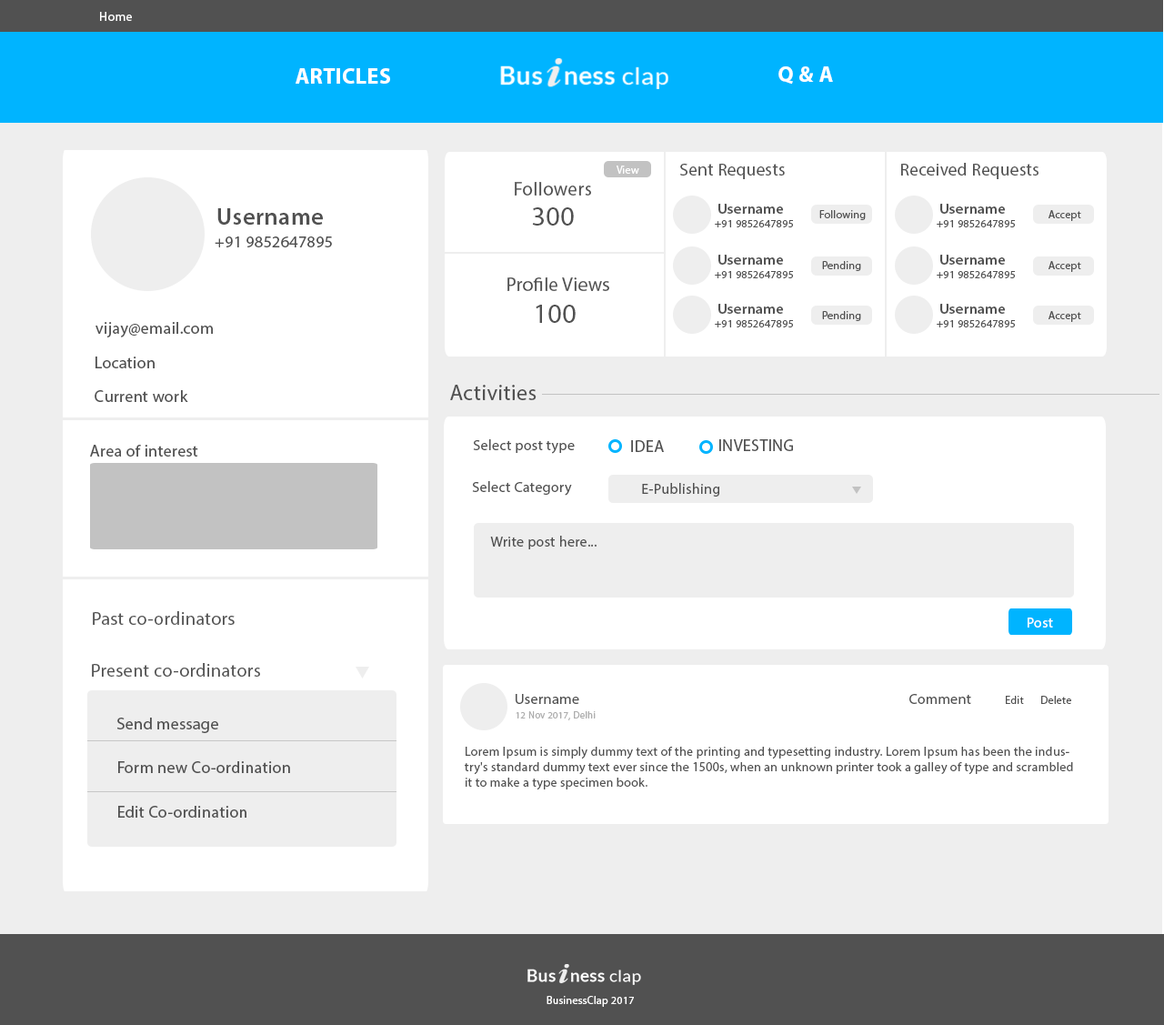
<style>
.page{position:relative;width:1164px;height:1025px;background:#ffffff}
.page>*{position:absolute;margin:0}
.t1{font:12.7px "MyriadPro-Regular";letter-spacing:0.02em;color:#ffffff}
.t2{font:21.8px "MyriadPro-Bold";letter-spacing:0.02em;color:#ffffff}
.t3{font:10.9px "MyriadPro-Regular";letter-spacing:0.02em;color:#ffffff}
.t4{font:17.3px "MyriadPro-Regular";letter-spacing:0.02em;color:#515151}
.t5{font:19.1px "MyriadPro-Regular";letter-spacing:0.02em;color:#515151}
.t6{font:23.6px "MyriadPro-Semibold";letter-spacing:0.02em;color:#515151}
.t7{font:27.3px "MyriadPro-Regular";letter-spacing:0.02em;color:#515151}
.t8{font:14.5px "MyriadPro-Semibold";letter-spacing:0.02em;color:#515151}
.t9{font:10.9px "MyriadPro-Regular";letter-spacing:0.02em;color:#515151}
.t10{font:16.4px "MyriadPro-Regular";letter-spacing:0.02em;color:#515151}
.t11{font:21.8px "MyriadPro-Regular";letter-spacing:0.02em;color:#515151}
.t12{font:14.5px "MyriadPro-Regular";letter-spacing:0.02em;color:#515151}
.t13{font:18.2px "MyriadPro-Regular";letter-spacing:0.02em;color:#515151}
.t14{font:14.5px "MyriadPro-Regular";letter-spacing:0.02em;color:#ffffff}
.t15{font:14.7px "MyriadPro-Regular";letter-spacing:0.02em;color:#515151}
.t16{font:9.8px "MyriadPro-Regular";letter-spacing:0.02em;color:#aeaeae}
.t17{font:12.7px/15.6px "MyriadPro-Regular";letter-spacing:0.02em;color:#515151}
</style>
<div class="page">
<p class="t1" style="left:100px;top:12px;width:32px;height:9px">Home</p>
<p class="t2" style="left:295px;top:68px;width:95px;height:16px">ARTICLES</p>
<p class="t2" style="left:778px;top:66px;width:55px;height:19px">Q &amp; A</p>
<p class="t3" style="left:616px;top:165px;width:23px;height:9px">View</p>
<p class="t4" style="left:680px;top:164px;width:105px;height:15px">Sent Requests</p>
<p class="t4" style="left:901px;top:163px;width:137px;height:16px">Received Requests</p>
<p class="t5" style="left:515px;top:182px;width:76px;height:13px">Followers</p>
<p class="t6" style="left:217px;top:208px;width:106px;height:17px">Username</p>
<p class="t7" style="left:532px;top:207px;width:42px;height:18px">300</p>
<p class="t8" style="left:718px;top:204px;width:66px;height:10px">Username</p>
<p class="t8" style="left:940px;top:204px;width:66px;height:10px">Username</p>
<p class="t9" style="left:715px;top:220px;width:78px;height:7px">+91 9852647895</p>
<p class="t9" style="left:819px;top:210px;width:47px;height:10px">Following</p>
<p class="t9" style="left:936px;top:220px;width:79px;height:7px">+91 9852647895</p>
<p class="t9" style="left:1048px;top:210px;width:33px;height:11px">Accept</p>
<p class="t10" style="left:215px;top:236px;width:117px;height:11px">+91 9852647895</p>
<p class="t8" style="left:718px;top:255px;width:66px;height:10px">Username</p>
<p class="t8" style="left:940px;top:255px;width:66px;height:10px">Username</p>
<p class="t9" style="left:822px;top:261px;width:39px;height:10px">Pending</p>
<p class="t9" style="left:1048px;top:261px;width:33px;height:11px">Accept</p>
<p class="t5" style="left:507px;top:277px;width:102px;height:14px">Profile Views</p>
<p class="t9" style="left:715px;top:271px;width:78px;height:7px">+91 9852647895</p>
<p class="t9" style="left:936px;top:271px;width:79px;height:7px">+91 9852647895</p>
<p class="t7" style="left:536px;top:305px;width:40px;height:18px">100</p>
<p class="t8" style="left:718px;top:304px;width:66px;height:10px">Username</p>
<p class="t8" style="left:940px;top:304px;width:66px;height:10px">Username</p>
<p class="t9" style="left:822px;top:311px;width:39px;height:10px">Pending</p>
<p class="t9" style="left:1048px;top:311px;width:33px;height:11px">Accept</p>
<p class="t10" style="left:95px;top:322px;width:118px;height:15px">vijay@email.com</p>
<p class="t9" style="left:715px;top:320px;width:78px;height:7px">+91 9852647895</p>
<p class="t9" style="left:936px;top:320px;width:79px;height:7px">+91 9852647895</p>
<p class="t10" style="left:95px;top:356px;width:60px;height:12px">Location</p>
<p class="t11" style="left:450px;top:385px;width:86px;height:15px">Activities</p>
<p class="t10" style="left:95px;top:390px;width:93px;height:12px">Current work</p>
<p class="t10" style="left:90px;top:445px;width:108px;height:11px">Area of interest</p>
<p class="t12" style="left:473px;top:439px;width:102px;height:15px">Select post type</p>
<p class="t10" style="left:631px;top:440px;width:33px;height:12px">IDEA</p>
<p class="t10" style="left:719px;top:439px;width:74px;height:12px">INVESTING</p>
<p class="t12" style="left:472px;top:481px;width:100px;height:15px">Select Category</p>
<p class="t12" style="left:642px;top:483px;width:77px;height:13px">E-Publishing</p>
<p class="t12" style="left:490px;top:536px;width:106px;height:13px">Write post here...</p>
<p class="t13" style="left:93px;top:611px;width:142px;height:14px">Past co-ordinators</p>
<p class="t14" style="left:1027px;top:617px;width:26px;height:10px">Post</p>
<p class="t13" style="left:92px;top:663px;width:168px;height:13px">Present co-ordinators</p>
<p class="t15" style="left:516px;top:694px;width:63px;height:10px">Username</p>
<p class="t12" style="left:909px;top:694px;width:62px;height:10px">Comment</p>
<p class="t9" style="left:1006px;top:696px;width:18px;height:8px">Edit</p>
<p class="t9" style="left:1041px;top:696px;width:30px;height:8px">Delete</p>
<p class="t16" style="left:516px;top:711px;width:80px;height:9px">12 Nov 2017, Delhi</p>
<p class="t10" style="left:117px;top:717px;width:101px;height:16px">Send message</p>
<p class="t17" style="left:465px;top:746px;width:608px;height:44px">Lorem Ipsum is simply dummy text of the printing and typesetting industry. Lorem Ipsum has been the industry's standard dummy text ever since the 1500s, when an unknown printer took a galley of type and scrambled it to make a type specimen book.</p>
<p class="t10" style="left:118px;top:761px;width:172px;height:12px">Form new Co-ordination</p>
<p class="t10" style="left:118px;top:806px;width:128px;height:11px">Edit Co-ordination</p>
<p class="t3" style="left:546px;top:996px;width:88px;height:10px">BusinessClap 2017</p>
</div>
